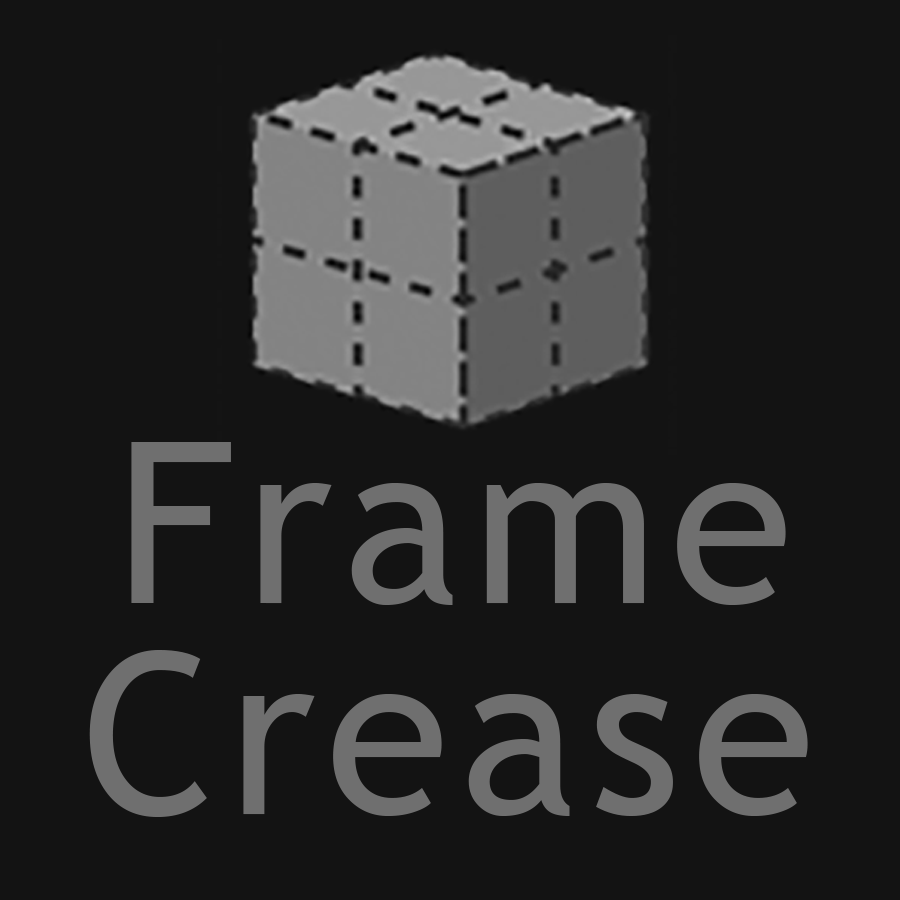
<style>
.page{position:relative;width:900px;height:900px;background:#131313}
.page>*{position:absolute;margin:0}
.t1{font:225px "TrebuchetMS";letter-spacing:0.05em;color:#6f6f6f}
</style>
<div class="page">
<p class="t1" style="left:131px;top:442px;width:655px;height:163px">Frame</p>
<p class="t1" style="left:89px;top:650px;width:719px;height:167px">Crease</p>
</div>
